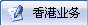
<style>
.page{position:relative;width:88px;height:25px}
.page>*{position:absolute;margin:0}
.t1{font:12px "SimSun";color:#000103}
</style>
<div class="page">
<p class="t1" style="left:33px;top:7px;width:47px;height:11px">香港业务</p>
</div>
